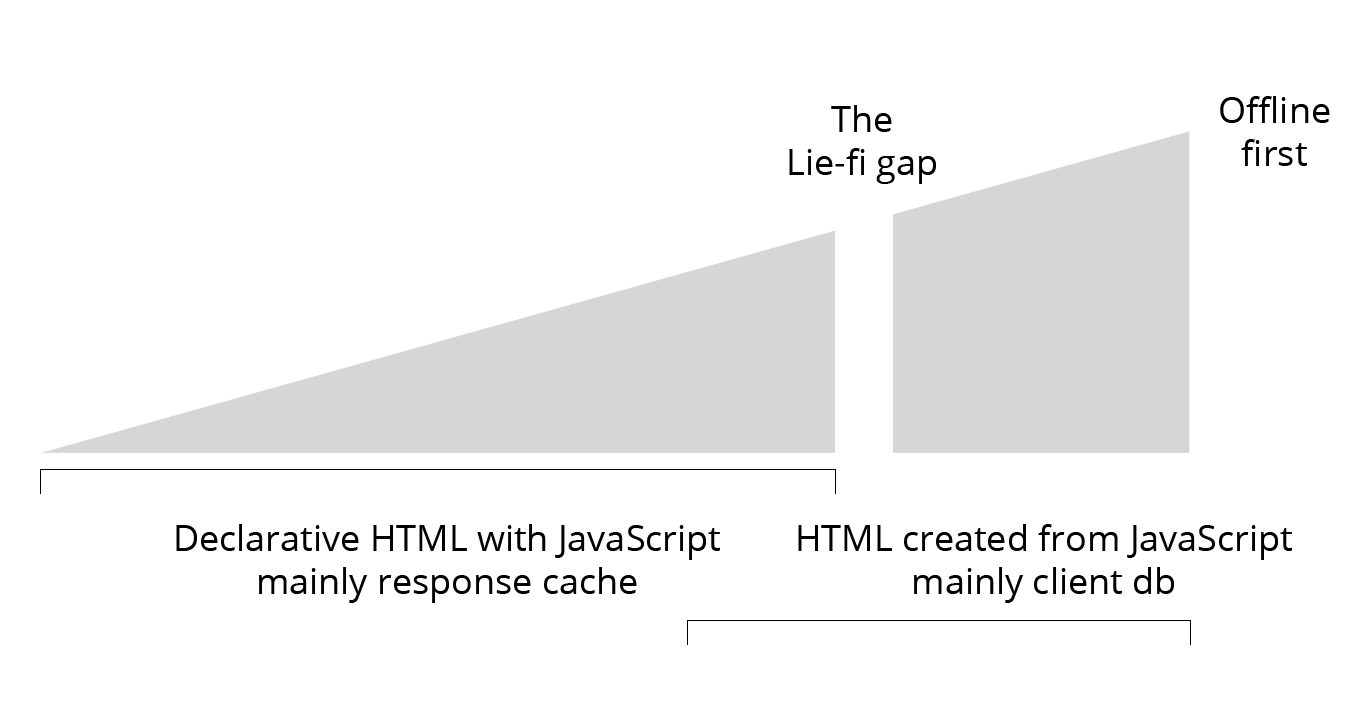
<style>
.page{position:relative;width:1362px;height:703px;background:#ffffff}
.page>*{position:absolute;margin:0}
.t1{font:36px "OpenSans";color:#000000}
</style>
<div class="page">
<p class="t1" style="left:1220px;top:96px;width:110px;height:70px;text-align:center">Offline<br>first</p>
<p class="t1" style="left:789px;top:105px;width:147px;height:79px;text-align:center">The<br>Lie-fi gap</p>
<p class="t1" style="left:176px;top:524px;width:544px;height:79px;text-align:center">Declarative HTML with JavaScript<br>mainly response cache</p>
<p class="t1" style="left:798px;top:524px;width:494px;height:79px;text-align:center">HTML created from JavaScript<br>mainly client db</p>
</div>
